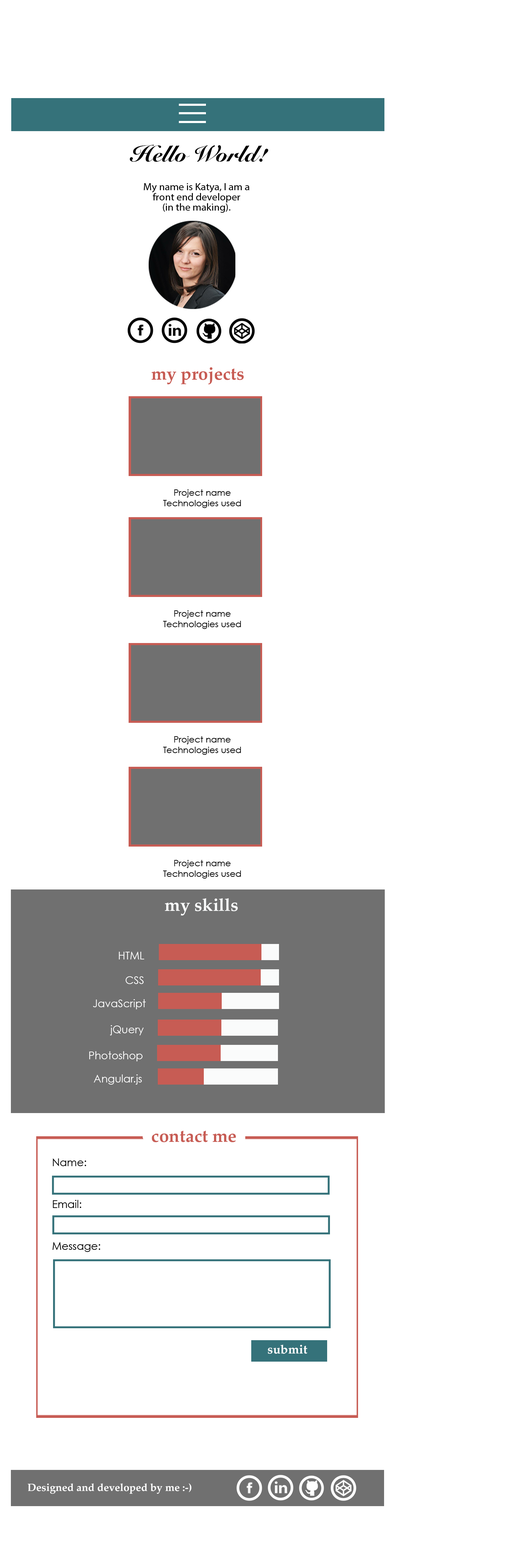
<style>
.page{position:relative;width:506px;height:1568px;background:#ffffff}
.page>*{position:absolute;margin:0}
.t1{font:22.5px "SnellRoundhand-Black";color:#000000}
.t2{font:10px/10.2px "MyriadPro-Regular";color:#000000;scale:1.05 1}
.t3{font:14.1px "CenturyGothic";color:#fafbfb}
.t4{font:17.6px "Palatino-Bold";color:#c75c54}
.t5{font:17.6px "Palatino-Bold";color:#fafbfb}
.t6{font:10.5px "CenturyGothic";color:#ffffff}
.t7{font:10.5px "CenturyGothic";color:#000000}
.t8{font:12.3px "Palatino-Bold";color:#ffffff}
.t9{font:10.5px "Palatino-Bold";color:#ffffff}
</style>
<div class="page">
<p class="t1" style="left:130px;top:145px;width:139px;height:17px">Hello World!</p>
<p class="t2" style="left:144px;top:183px;width:106px;height:30px;text-align:center"><span class="t3"><br></span>My name is Katya, I am a<br>front end developer <br>(in the making).</p>
<p class="t4" style="left:152px;top:367px;width:92px;height:18px">my projects</p>
<p class="t5" style="left:165px;top:898px;width:73px;height:18px">my skills</p>
<p class="t6" style="left:119px;top:952px;width:25px;height:7px">HTML</p>
<p class="t6" style="left:126px;top:976px;width:18px;height:8px">CSS</p>
<p class="t6" style="left:93px;top:999px;width:53px;height:10px">JavaScript</p>
<p class="t6" style="left:110px;top:1025px;width:34px;height:10px">jQuery</p>
<p class="t6" style="left:89px;top:1051px;width:54px;height:10px">Photoshop</p>
<p class="t6" style="left:94px;top:1074px;width:48px;height:11px">Angular.js</p>
<p class="t4" style="left:152px;top:1131px;width:84px;height:11px">contact me</p>
<p class="t7" style="left:53px;top:1158px;width:33px;height:8px">Name:</p>
<p class="t7" style="left:53px;top:1200px;width:28px;height:8px">Email:</p>
<p class="t7" style="left:52px;top:1242px;width:48px;height:10px">Message:</p>
<p class="t8" style="left:268px;top:1344px;width:40px;height:10px">submit</p>
<p class="t9" style="left:28px;top:1483px;width:164px;height:11px">Designed and developed by me :-)</p>
</div>
